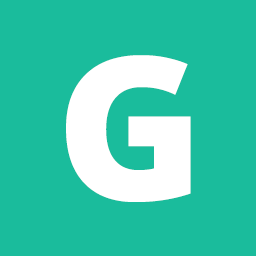
<style>
.page{position:relative;width:256px;height:256px;background:#1abc9c}
.page>*{position:absolute;margin:0}
.t1{font:200px "OpenSans-Extrabold";color:#ffffff}
</style>
<div class="page">
<p class="t1" style="left:66px;top:55px;width:125px;height:147px">G</p>
</div>
